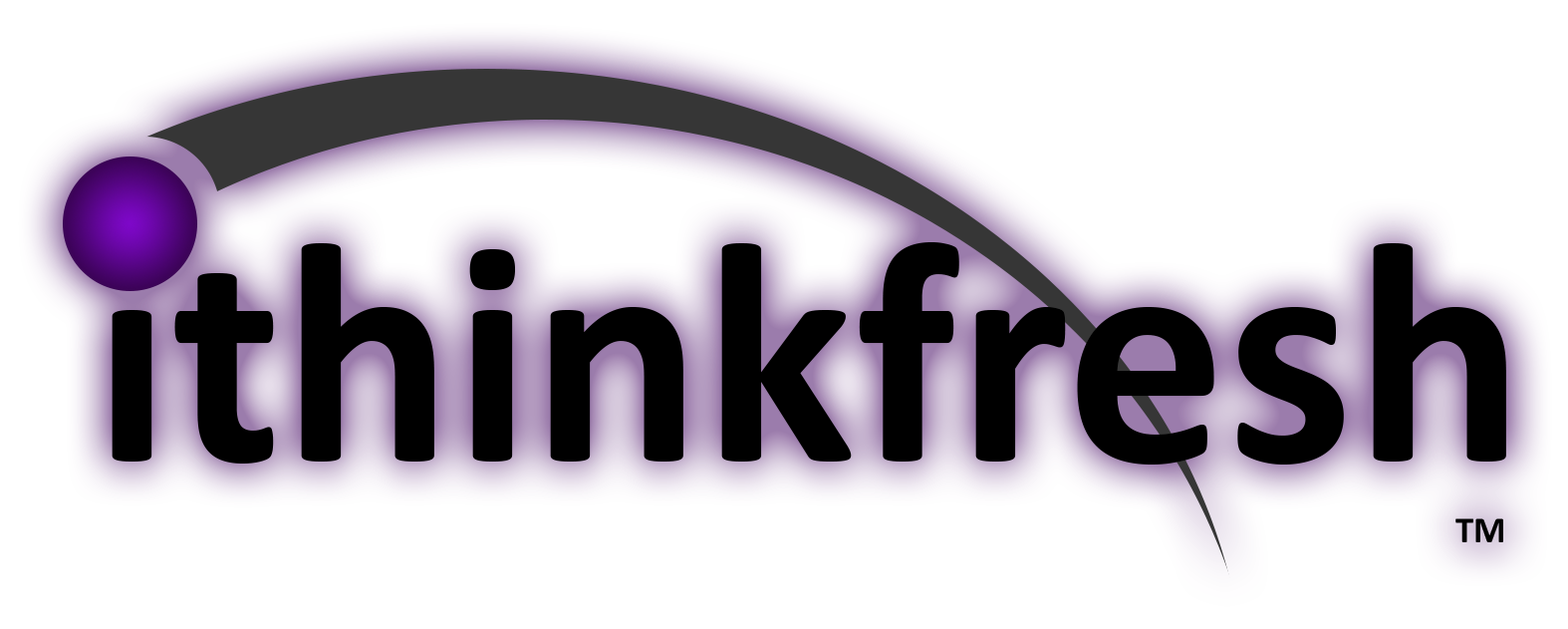
<style>
.page{position:relative;width:1568px;height:629px;background:#ffffff}
.page>*{position:absolute;margin:0}
.t1{font:318.8px "Calibri-Bold";color:#000000}
.t2{font:37.2px "Calibri-Bold";color:#000000}
</style>
<div class="page">
<p class="t1" style="left:109px;top:242px;width:1397px;height:222px">ithinkfresh</p>
<p class="t2" style="left:1455px;top:518px;width:48px;height:24px">TM</p>
</div>
